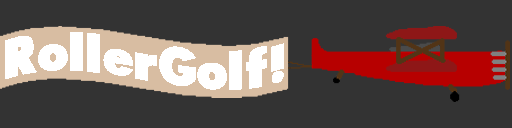
<style>
.page{position:relative;width:512px;height:128px;background:#333333}
.page>*{position:absolute;margin:0}
.t1{font:52.4px "SansSerifExbFLF";color:#ffffff}
</style>
<div class="page">
<p class="t1" style="left:5px;top:32px;width:279px;height:58px">RollerGolf!</p>
</div>
